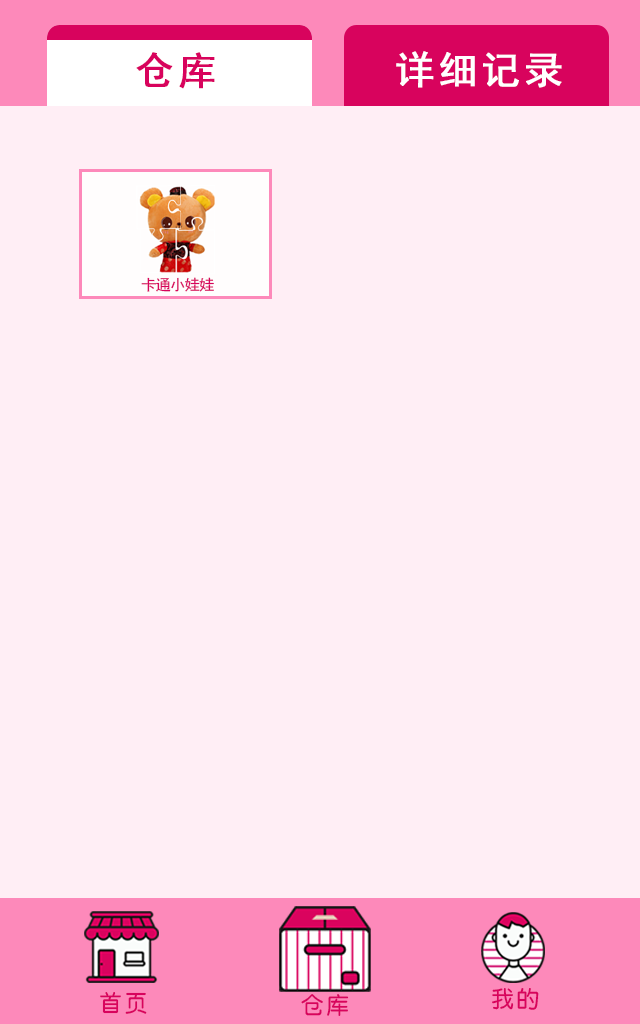
<style>
.page{position:relative;width:640px;height:1024px;background:#ffeef5}
.page>*{position:absolute;margin:0}
.t1{font:38.4px "SimHei";letter-spacing:0.096em;color:#d8035d;font-weight:bold}
.t2{font:38.4px "SimHei";letter-spacing:0.096em;color:#ffffff;font-weight:bold}
.t3{font:15px "SimHei";letter-spacing:-0.059em;color:#d8035d}
.t4{font:23.3px "By-JOSSQ-DMF-in-BeiJing";letter-spacing:0.096em;color:#d8035d}
</style>
<div class="page">
<p class="t1" style="left:136px;top:52px;width:79px;height:37px">仓库</p>
<p class="t2" style="left:396px;top:51px;width:166px;height:37px">详细记录</p>
<p class="t3" style="left:141px;top:277px;width:73px;height:15px">卡通小娃娃</p>
<p class="t4" style="left:492px;top:988px;width:47px;height:22px">我的</p>
<p class="t4" style="left:100px;top:992px;width:47px;height:22px">首页</p>
<p class="t4" style="left:301px;top:994px;width:48px;height:22px">仓库</p>
</div>
